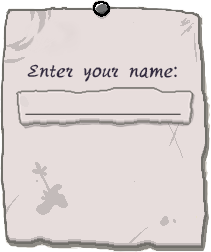
<style>
.page{position:relative;width:211px;height:252px;background:#e7dddc}
.page>*{position:absolute;margin:0}
.t1{font:19.6px "Tensentype-TieShanKaiShuJ";color:#342c41}
</style>
<div class="page">
<p class="t1" style="left:27px;top:64px;width:150px;height:18px">Enter your name:</p>
</div>
